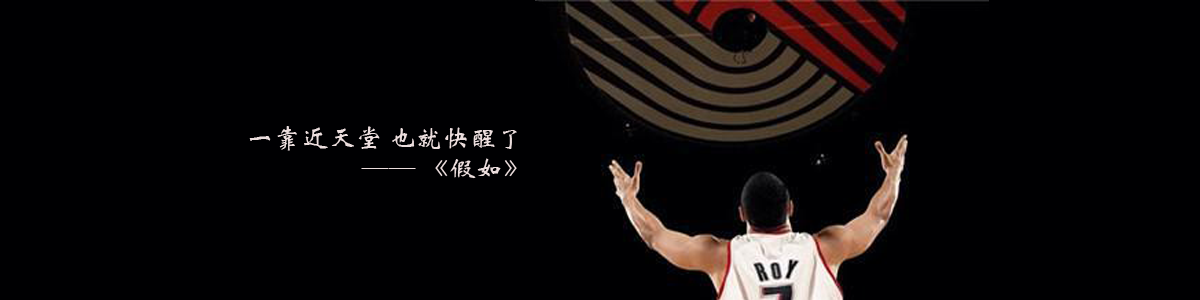
<style>
.page{position:relative;width:1200px;height:300px;background:#000002}
.page>*{position:absolute;margin:0}
.t1{font:27px/6px "STXinwei";color:#ebdddd}
</style>
<div class="page">
<p class="t1" style="left:249px;top:126px;width:268px;height:53px">一靠近天堂 也就快醒了<br><br><br><br><br>    —— 《假如》</p>
</div>
